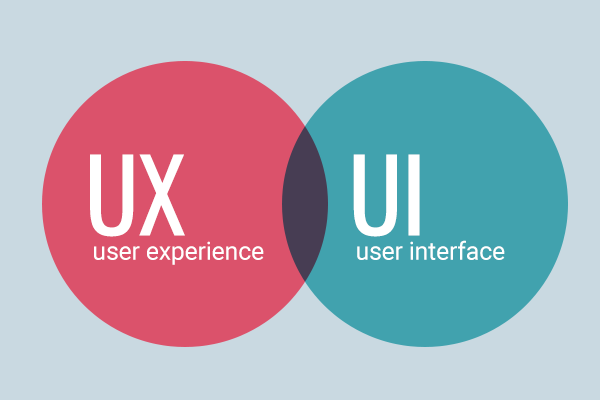
<style>
.page{position:relative;width:600px;height:400px;background:#c9d9e1}
.page>*{position:absolute;margin:0}
.t1{font:100px "Oswald-Regular";letter-spacing:-0.01em;color:#ffffff}
.t2{font:150px "Oswald-Regular";letter-spacing:-0.01em;color:#ffffff}
.t3{font:25px "Roboto-Regular";letter-spacing:-0.01em;color:#ffffff}
</style>
<div class="page">
<p class="t1" style="left:90px;top:154px;width:95px;height:83px"><span class="t2">  </span>UX</p>
<p class="t1" style="left:353px;top:154px;width:67px;height:83px"><span class="t2">  </span>UI</p>
<p class="t3" style="left:94px;top:241px;width:170px;height:24px">user experience</p>
<p class="t3" style="left:357px;top:240px;width:148px;height:20px">user interface</p>
</div>
